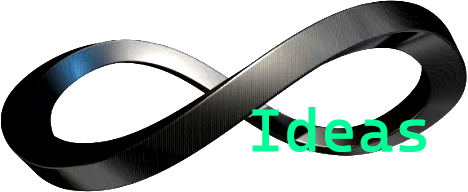
<style>
.page{position:relative;width:468px;height:192px;background:#ffffff}
.page>*{position:absolute;margin:0}
.t1{font:60px "CascadiaCode-Regular";color:#00ff99;font-weight:bold}
</style>
<div class="page">
<p class="t1" style="left:252px;top:107px;width:174px;height:45px">Ideas</p>
</div>
